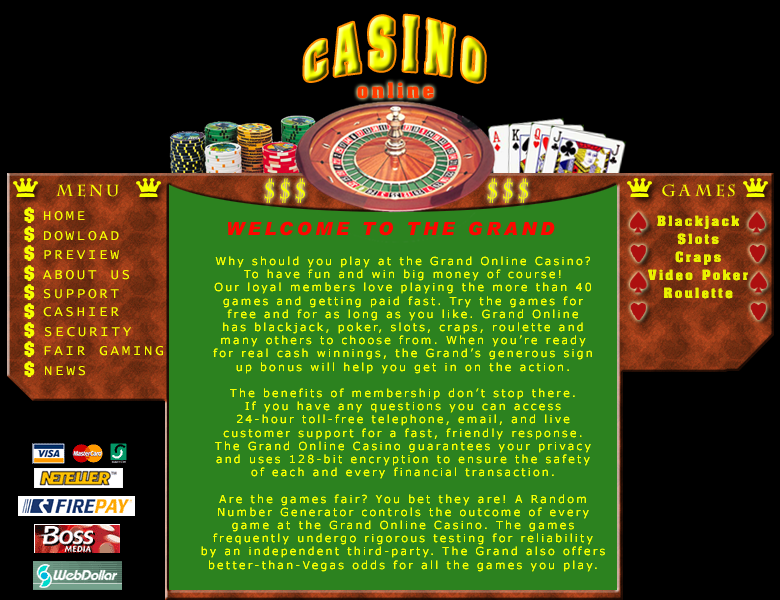
<style>
.page{position:relative;width:780px;height:600px;background:#000000}
.page>*{position:absolute;margin:0}
.t1{font:36px "AardvarkBold";letter-spacing:0.2em}
.t2{font:18px "AardvarkBold";letter-spacing:0.2em;color:#ff3c00}
.t3{font:16px "DSCenturyCapitals";letter-spacing:0.2em;color:#f6ff00}
.t4{font:24px "DSCenturyCapitals";letter-spacing:0.2em;color:#f6ff00}
.t5{font:16px "AardvarkBold";letter-spacing:0.2em;color:#f6ff00}
.t6{font:14px "LucidaConsole";letter-spacing:0.2em;color:#f6ff00}
.t7{font:18px "Arial-BlackItalic";letter-spacing:0.2em;color:#ff0600}
.t8{font:12px/18px "AardvarkBold";letter-spacing:0.2em;color:#e9f200}
.t9{font:11px "Verdana";letter-spacing:0.2em;color:#f6ff00}
</style>
<div class="page">
<p class="t1" style="left:304px;top:15px;width:181px;height:67px;rotate:1deg">CASINO</p>
<p class="t2" style="left:357px;top:82px;width:77px;height:17px">online</p>
<p class="t3" style="left:56px;top:183px;width:63px;height:15px">MENU</p>
<p class="t4" style="left:264px;top:178px;width:42px;height:25px">$$$</p>
<p class="t4" style="left:487px;top:178px;width:42px;height:25px">$$$</p>
<p class="t3" style="left:662px;top:183px;width:73px;height:15px">GAMES</p>
<p class="t5" style="left:24px;top:207px;width:11px;height:170px">$ <br>$<br>$<br>$<br>$<br>$<br>$<br>$<br>$</p>
<p class="t6" style="left:44px;top:211px;width:41px;height:10px">HOME</p>
<p class="t7" style="left:228px;top:221px;width:327px;height:15px">WELCOME TO THE GRAND</p>
<p class="t8" style="left:648px;top:215px;width:100px;height:84px;text-align:center">Blackjack<br>Slots<br>Craps<br>Video Poker<br>Roulette</p>
<p class="t6" style="left:44px;top:231px;width:75px;height:10px">DOWLOAD</p>
<p class="t6" style="left:44px;top:250px;width:75px;height:9px">PREVIEW</p>
<p class="t9" style="left:201px;top:256px;width:404px;height:316px;text-align:center">Why should you play at the Grand Online Casino? <br>To have fun and win big money of course! <br>Our loyal members love playing the more than 40 <br>games and getting paid fast. Try the games for <br>free and for as long as you like. Grand Online <br>has blackjack, poker, slots, craps, roulette and <br>many others to choose from. When you’re ready <br>for real cash winnings, the Grand’s generous sign <br>up bonus will help you get in on the action. <br><br>The benefits of membership don’t stop there. <br>If you have any questions you can access <br>24-hour toll-free telephone, email, and live <br>customer support for a fast, friendly response. <br>The Grand Online Casino guarantees your privacy <br>and uses 128-bit encryption to ensure the safety <br>of each and every financial transaction.<br><br>Are the games fair? You bet they are! A Random <br>Number Generator controls the outcome of every <br>game at the Grand Online Casino. The games <br>frequently undergo rigorous testing for reliability <br>by an independent third-party. The Grand also offers <br>better-than-Vegas odds for all the games you play.</p>
<p class="t6" style="left:43px;top:270px;width:86px;height:10px">ABOUT US</p>
<p class="t6" style="left:44px;top:289px;width:75px;height:10px">SUPPORT</p>
<p class="t6" style="left:43px;top:307px;width:76px;height:10px">CASHIER</p>
<p class="t6" style="left:45px;top:327px;width:87px;height:10px">SECURITY</p>
<p class="t6" style="left:44px;top:346px;width:119px;height:10px">FAIR GAMING</p>
<p class="t6" style="left:45px;top:366px;width:40px;height:10px">NEWS</p>
</div>
